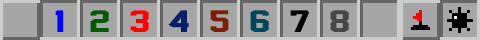
<style>
.page{position:relative;width:480px;height:40px;background:#a6a6a6}
.page>*{position:absolute;margin:0}
.t1{font:28.5px "JerseyM54";letter-spacing:-0.08em;color:#0100fb;scale:1.5 1}
.t2{font:28.5px "JerseyM54";letter-spacing:-0.08em;color:#005a00;scale:1.5 1}
.t3{font:28.5px "JerseyM54";letter-spacing:-0.08em;color:#ff0000;scale:1.5 1}
.t4{font:28.5px "JerseyM54";letter-spacing:-0.08em;color:#021f68;scale:1.5 1}
.t5{font:28.5px "JerseyM54";letter-spacing:-0.08em;color:#7a1d00;scale:1.5 1}
.t6{font:28.5px "JerseyM54";letter-spacing:-0.08em;color:#00465a;scale:1.5 1}
.t7{font:28.5px "JerseyM54";letter-spacing:-0.08em;color:#000000;scale:1.5 1}
.t8{font:28.5px "JerseyM54";letter-spacing:-0.08em;color:#464646;scale:1.5 1}
</style>
<div class="page">
<p class="t1" style="left:55px;top:10px;width:9px;height:22px">1</p>
<p class="t2" style="left:90px;top:10px;width:19px;height:22px">2</p>
<p class="t3" style="left:130px;top:10px;width:19px;height:22px">3</p>
<p class="t4" style="left:168px;top:10px;width:21px;height:22px">4</p>
<p class="t5" style="left:210px;top:10px;width:19px;height:22px">5</p>
<p class="t6" style="left:250px;top:10px;width:19px;height:22px">6</p>
<p class="t7" style="left:290px;top:10px;width:20px;height:22px">7</p>
<p class="t8" style="left:330px;top:10px;width:19px;height:22px">8</p>
</div>
